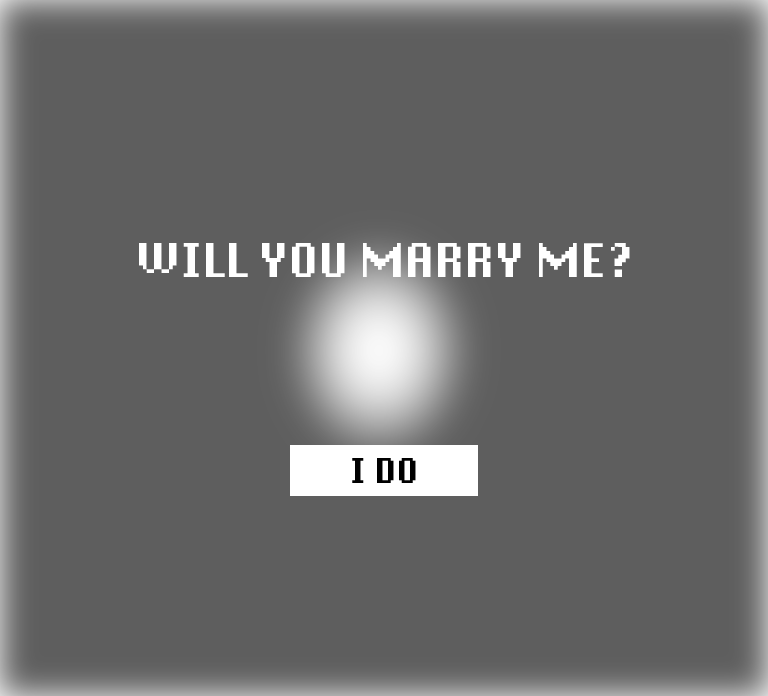
<style>
.page{position:relative;width:768px;height:696px;background:#5e5e5e}
.page>*{position:absolute;margin:0}
.t1{font:33px "DePixel-Bold";color:#ffffff}
.t2{font:24px "DePixel-Bold";color:#000000}
</style>
<div class="page">
<p class="t1" style="left:139px;top:243px;width:491px;height:34px">WILL YOU MARRY ME?</p>
<p class="t2" style="left:352px;top:458px;width:64px;height:25px">I DO</p>
</div>
